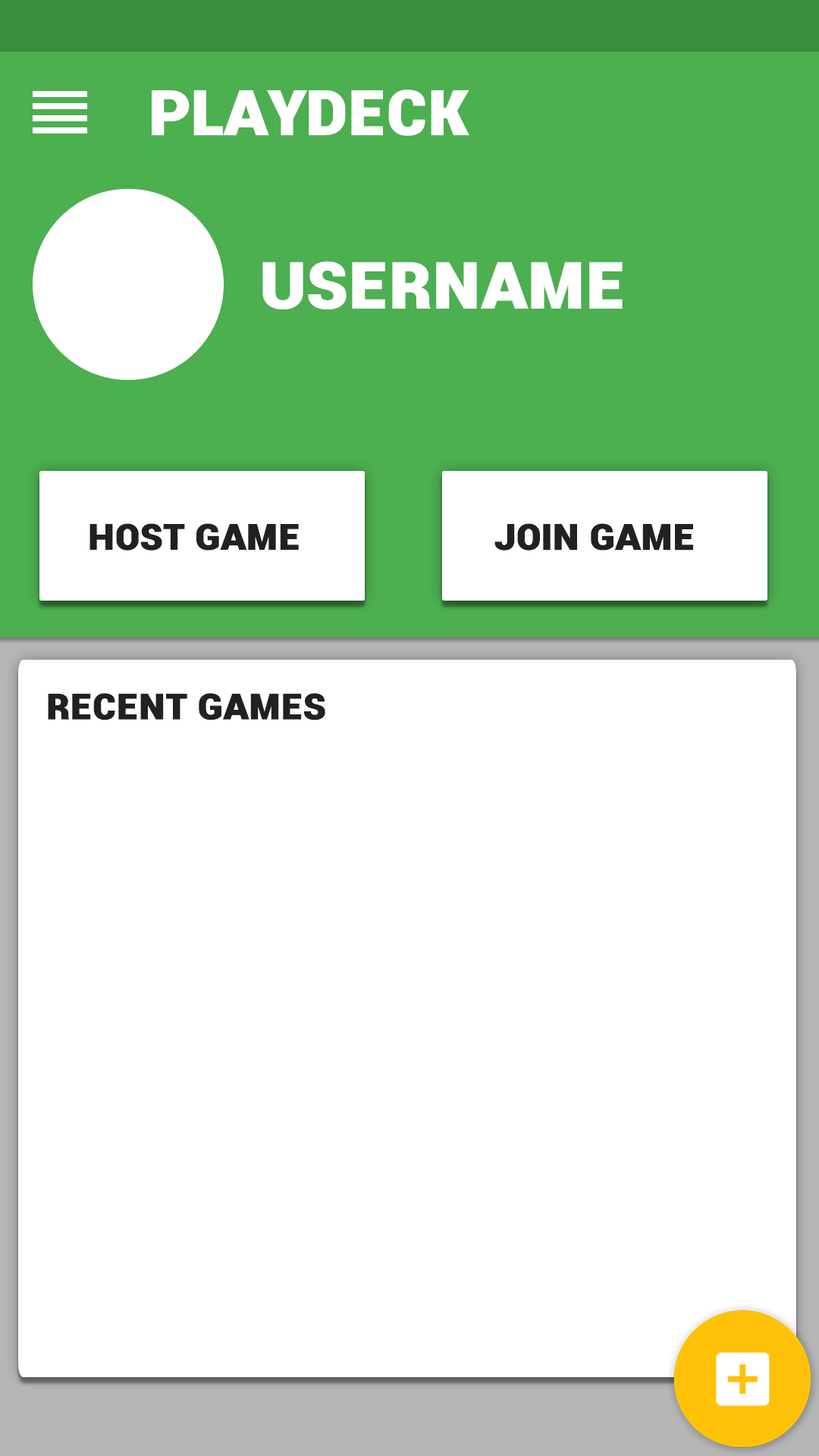
<style>
.page{position:relative;width:819px;height:1456px;background:#ffffff}
.page>*{position:absolute;margin:0}
.t1{font:78.4px "RobotoCondensed-Bold";letter-spacing:-0.02em;color:#ffffff;font-variant:small-caps;scale:1.11 1}
.t2{font:81.5px "RobotoCondensed-Bold";letter-spacing:-0.02em;color:#ffffff;font-variant:small-caps;scale:1.12 1}
.t3{font:45.1px "RobotoCondensed-Bold";letter-spacing:-0.02em;color:#212121;font-variant:small-caps;scale:1.12 1}
</style>
<div class="page">
<p class="t1" style="left:152px;top:89px;width:317px;height:47px">PLAYDECK</p>
<p class="t2" style="left:262px;top:261px;width:361px;height:48px">Username</p>
<p class="t3" style="left:89px;top:523px;width:210px;height:28px">Host Game</p>
<p class="t3" style="left:494px;top:523px;width:199px;height:28px">Join Game</p>
<p class="t3" style="left:48px;top:693px;width:277px;height:27px">Recent Games</p>
</div>
